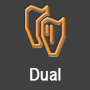
<style>
.page{position:relative;width:90px;height:90px;background:#404040}
.page>*{position:absolute;margin:0}
.t1{font:14.7px "Geneva";color:#f9f9f9;font-weight:bold}
</style>
<div class="page">
<p class="t1" style="left:30px;top:68px;width:31px;height:13px">Dual</p>
</div>
